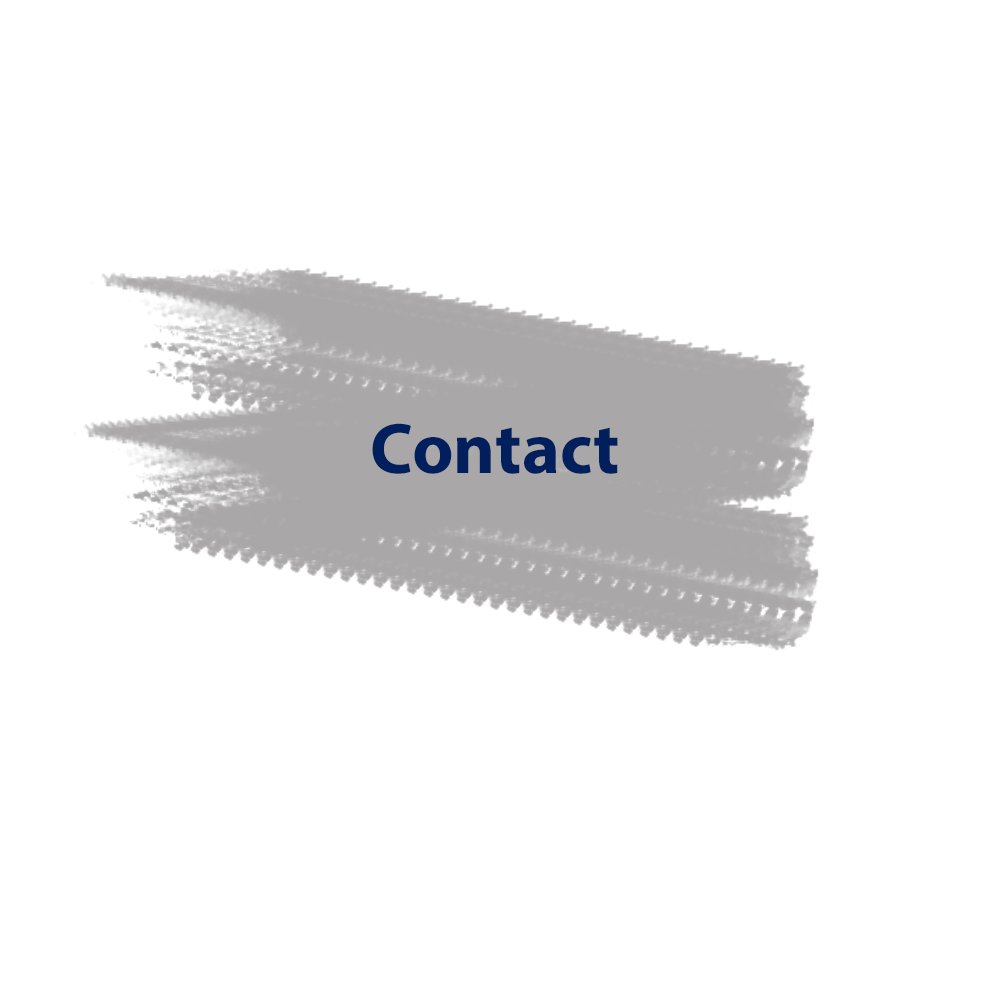
<style>
.page{position:relative;width:1000px;height:1000px;background:#ffffff}
.page>*{position:absolute;margin:0}
.t1{font:72px "MyriadPro-Bold";color:#001f5c}
</style>
<div class="page">
<p class="t1" style="left:372px;top:423px;width:246px;height:51px">Contact</p>
</div>
